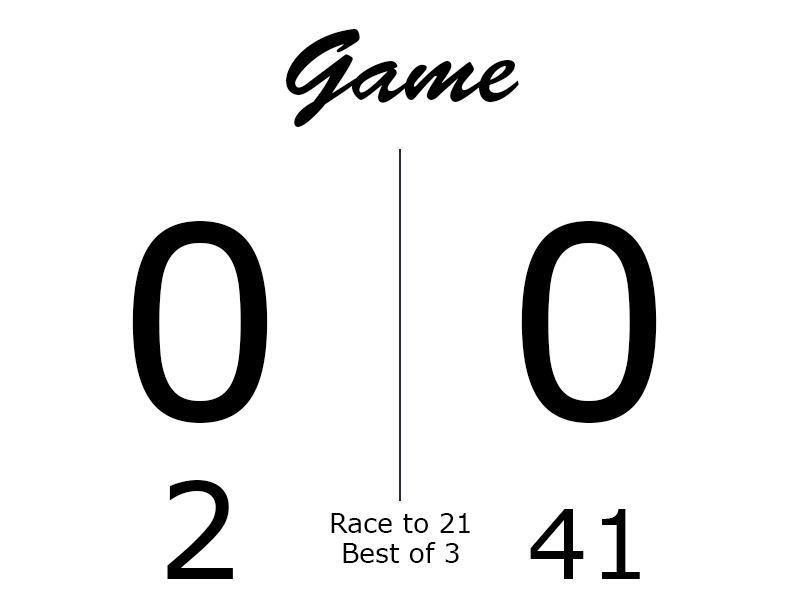
<style>
.page{position:relative;width:800px;height:600px;background:#ffffff}
.page>*{position:absolute;margin:0}
.t1{font:104px "BrushScriptStd";color:#000000}
.t2{font:266.6px "Verdana";color:#000000}
.t3{font:133.3px "Verdana";color:#000000}
.t4{font:96px "Verdana";color:#000000}
.t5{font:26.7px "Verdana";color:#000000}
</style>
<div class="page">
<p class="t1" style="left:286px;top:28px;width:233px;height:99px">Game</p>
<p class="t2" style="left:132px;top:221px;width:136px;height:202px">0</p>
<p class="t2" style="left:521px;top:221px;width:136px;height:202px">0</p>
<p class="t3" style="left:167px;top:480px;width:66px;height:99px">2</p>
<p class="t4" style="left:530px;top:509px;width:110px;height:70px">41</p>
<p class="t5" style="left:331px;top:513px;width:139px;height:20px">Race to 21</p>
<p class="t5" style="left:343px;top:542px;width:116px;height:21px">Best of 3</p>
</div>
